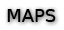
<style>
.page{position:relative;width:64px;height:30px;background:#ffffff}
.page>*{position:absolute;margin:0}
.t1{font:18px "BitstreamVeraSans-Roman";color:#000000}
</style>
<div class="page">
<p class="t1" style="left:7px;top:9px;width:49px;height:13px">MAPS</p>
</div>
